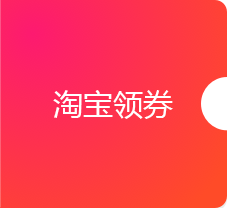
<style>
.page{position:relative;width:227px;height:208px}
.page>*{position:absolute;margin:0}
.t1{font:30px "MicrosoftYaHei";color:#ffffff}
</style>
<div class="page">
<p class="t1" style="left:53px;top:90px;width:120px;height:29px">淘宝领券</p>
</div>
